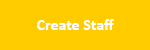
<style>
.page{position:relative;width:150px;height:50px;background:#ffcc00}
.page>*{position:absolute;margin:0}
.t1{font:16px "Calibri-Bold";color:#ffffff}
</style>
<div class="page">
<p class="t1" style="left:37px;top:19px;width:77px;height:11px">Create Staff</p>
</div>
